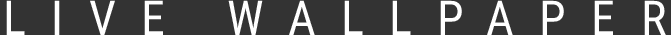
<style>
.page{position:relative;width:671px;height:35px;background:#333333}
.page>*{position:absolute;margin:0}
.t1{font:48px "RobotoCondensed-Regular";letter-spacing:0.53em;color:#ffffff}
</style>
<div class="page">
<p class="t1" style="left:6px;top:0px;width:660px;height:35px">LIVE WALLPAPER</p>
</div>
